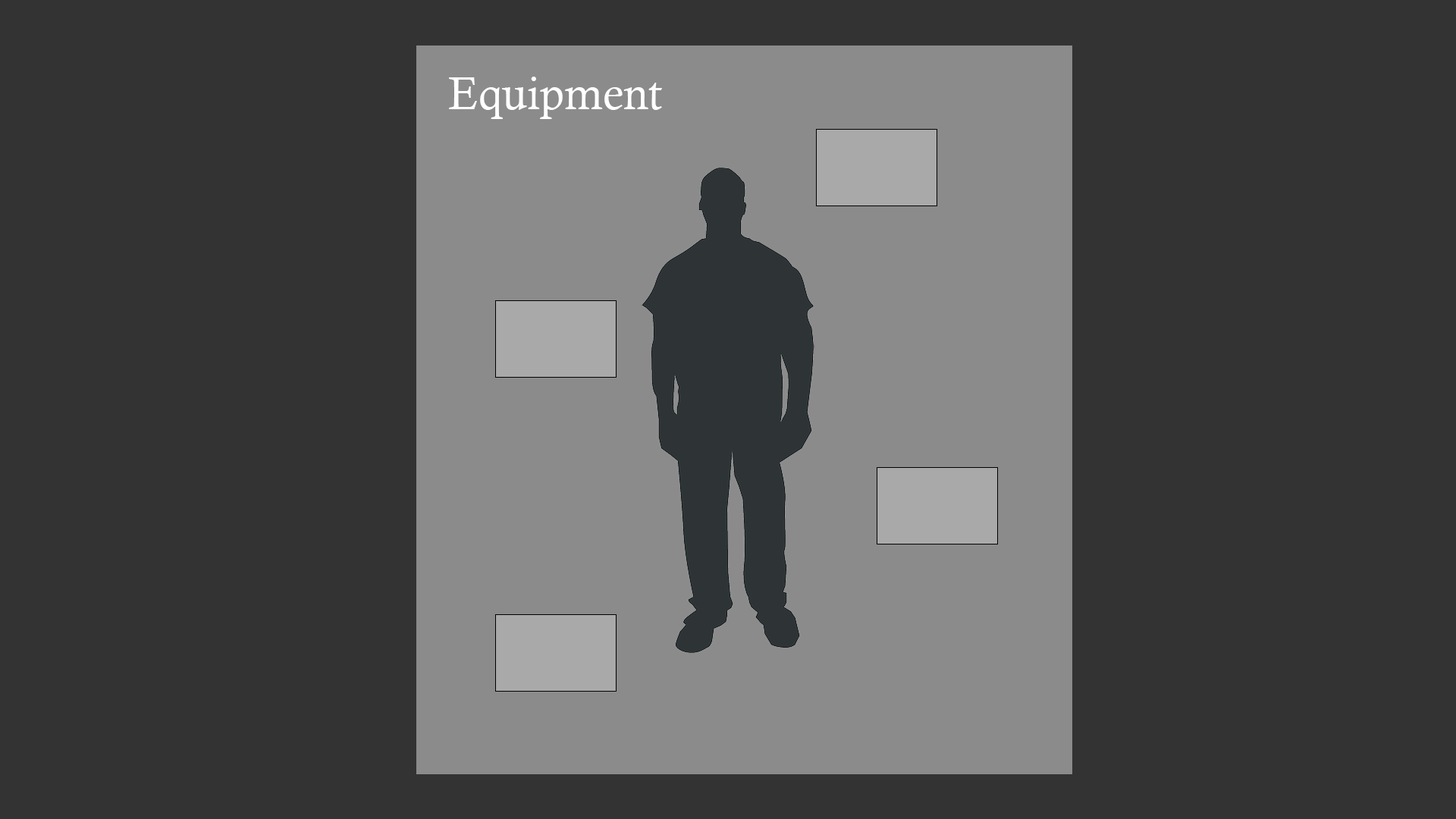
<style>
.page{position:relative;width:1456px;height:819px;background:#333333}
.page>*{position:absolute;margin:0}
.t1{font:45.5px "CalistoMT";color:#ffffff}
</style>
<div class="page">
<p class="t1" style="left:449px;top:77px;width:213px;height:42px">Equipment</p>
</div>
